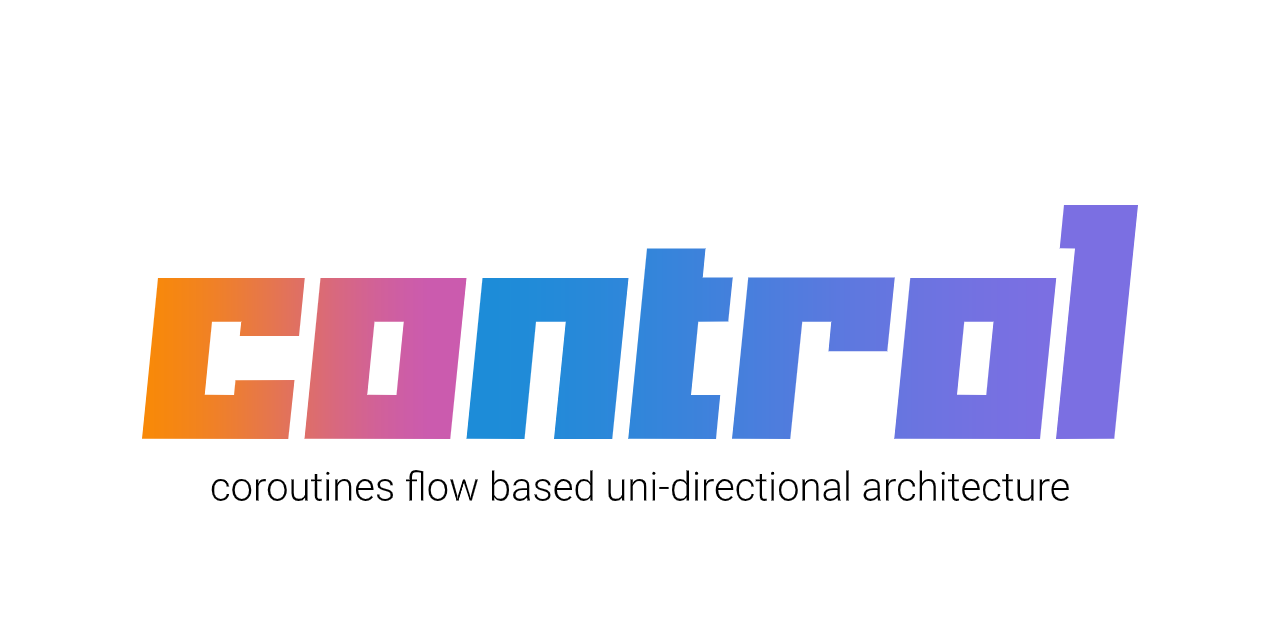
<style>
.page{position:relative;width:1280px;height:640px;background:#ffffff}
.page>*{position:absolute;margin:0}
.t1{font:40px "Roboto-Light";color:#000000}
</style>
<div class="page">
<p class="t1" style="left:211px;top:470px;width:858px;height:31px">coroutines flow based uni-directional architecture</p>
</div>
